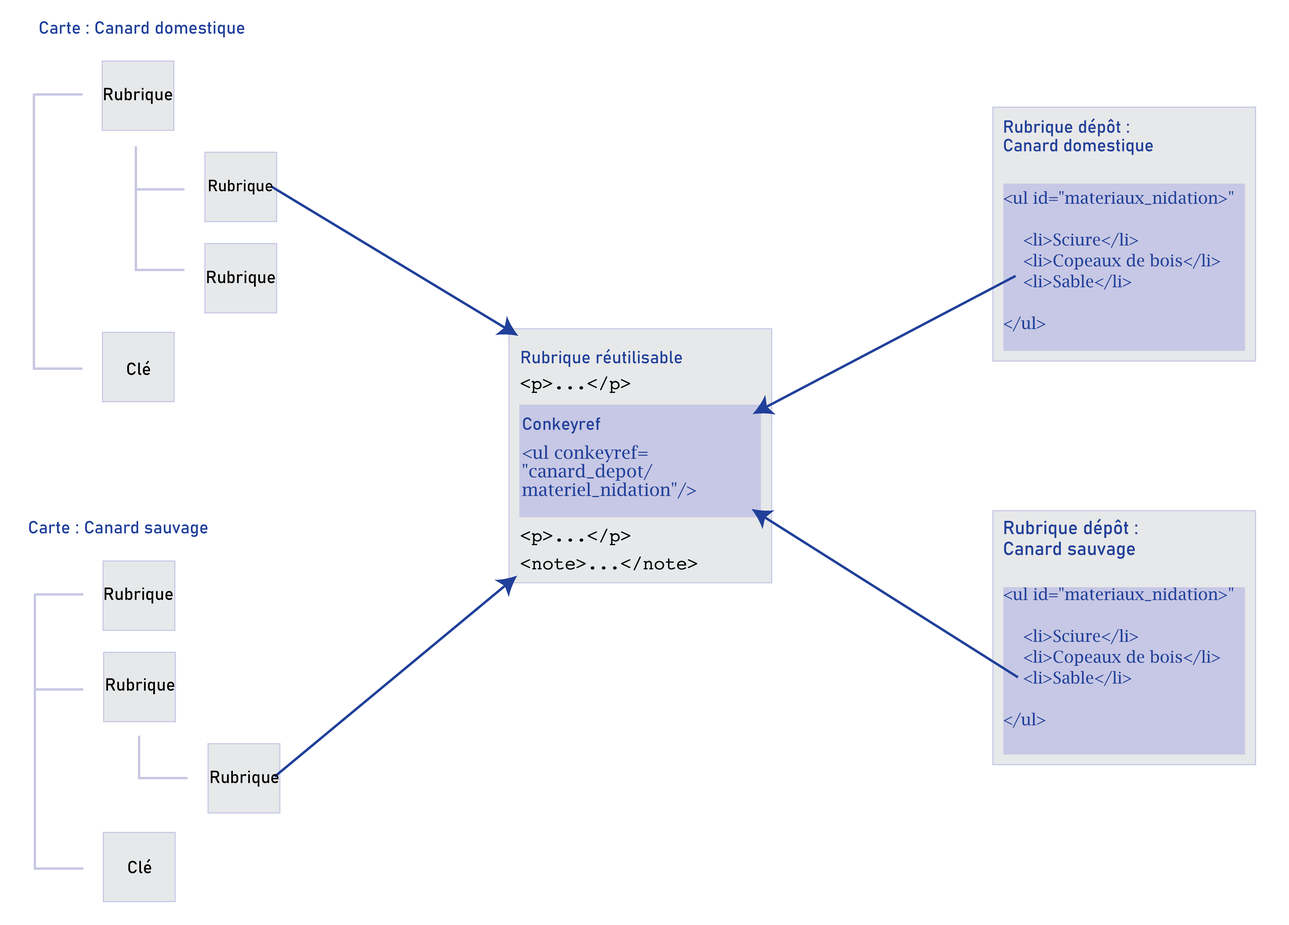
<style>
.page{position:relative;width:1289px;height:925px;background:#ffffff}
.page>*{position:absolute;margin:0}
.t1{font:17.4px "Bahnschrift";color:#20409a}
.t2{font:17.4px "Bahnschrift";color:#000000}
.t3{font:17.4px/18.6px "Bahnschrift";color:#20409a}
.t4{font:16.2px "Bahnschrift";color:#000000}
.t5{font:16.2px/20.9px "LucidaBright";color:#20409a}
.t6{font:17.4px/18.6px "LucidaBright";color:#20409a}
.t7{font:18.6px/20.9px "Bahnschrift";color:#20409a}
</style>
<div class="page">
<p class="t1" style="left:40px;top:21px;width:204px;height:16px">Carte : Canard domestique</p>
<p class="t2" style="left:104px;top:88px;width:68px;height:16px">Rubrique</p>
<p class="t3" style="left:1004px;top:118px;width:148px;height:37px">Rubrique dépôt : <br>Canard domestique</p>
<p class="t4" style="left:209px;top:180px;width:63px;height:15px">Rubrique</p>
<p class="t5" style="left:1003px;top:191px;width:230px;height:141px">&lt;ul id="materiaux_nidation&gt;"<br> <br>  &lt;li&gt;Sciure&lt;/li&gt;<br>  &lt;li&gt;Copeaux de bois&lt;/li&gt;<br>  &lt;li&gt;Sable&lt;/li&gt;<br><br>&lt;/ul&gt;</p>
<p class="t2" style="left:207px;top:271px;width:68px;height:16px">Rubrique</p>
<p class="t1" style="left:521px;top:349px;width:161px;height:18px">Rubrique réutilisable</p>
<p class="t2" style="left:127px;top:361px;width:23px;height:14px">Clé</p>
<p class="t1" style="left:523px;top:417px;width:77px;height:17px">Conkeyref</p>
<p class="t6" style="left:522px;top:445px;width:174px;height:54px">&lt;ul conkeyref=<br>"canard_depot/<br>materiel_nidation"/&gt;</p>
<p class="t1" style="left:29px;top:521px;width:178px;height:16px">Carte : Canard sauvage</p>
<p class="t7" style="left:1004px;top:519px;width:133px;height:40px">Rubrique dépôt :<br>Canard sauvage</p>
<p class="t2" style="left:104px;top:588px;width:69px;height:16px">Rubrique</p>
<p class="t5" style="left:1003px;top:588px;width:230px;height:140px">&lt;ul id="materiaux_nidation&gt;"<br> <br>  &lt;li&gt;Sciure&lt;/li&gt;<br>  &lt;li&gt;Copeaux de bois&lt;/li&gt;<br>  &lt;li&gt;Sable&lt;/li&gt;<br><br>&lt;/ul&gt;</p>
<p class="t2" style="left:106px;top:678px;width:68px;height:17px">Rubrique</p>
<p class="t2" style="left:211px;top:771px;width:67px;height:16px">Rubrique</p>
<p class="t2" style="left:128px;top:859px;width:23px;height:15px">Clé</p>
</div>
